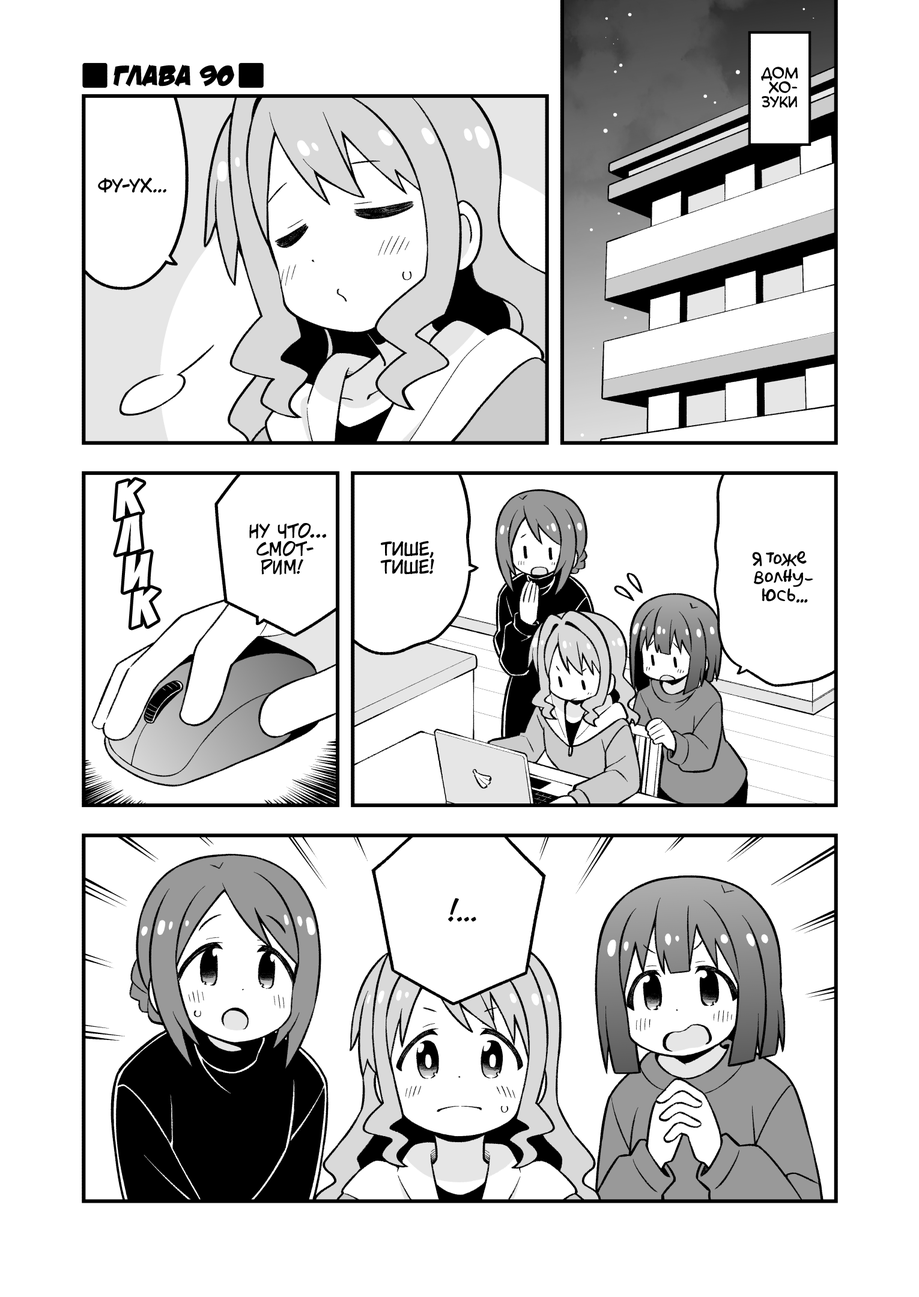
<style>
.page{position:relative;width:919px;height:1297px;background:#ffffff}
.page>*{position:absolute;margin:0}
.t1{font:28.8px "v_DamnNoisyKids";color:#000000;text-transform:uppercase}
.t2{font:14.4px "v_CCMonologous";color:#000000;text-transform:uppercase}
.t3{font:18px "KuraiVoice2";color:#000000;text-transform:uppercase}
.t4{font:54.1px "BadaBoom";color:#ffffff;text-transform:uppercase;scale:1.2 1}
.t5{font:18px "v_CCJeffCampbell";color:#000000;text-transform:uppercase}
.t6{font:18px "AkbarPlain";color:#000000}
.t7{font:21.6px "v_CCJeffCampbell";color:#000000;text-transform:uppercase}
.t8{font:28.8px "v_CCJeffCampbell";color:#000000;text-transform:uppercase}
</style>
<div class="page">
<p class="t1" style="left:113px;top:64px;width:121px;height:22px">Глава 90</p>
<p class="t2" style="left:761px;top:67px;width:37px;height:41px;text-align:center">Дом<br>Хо-<br>зуки</p>
<p class="t3" style="left:98px;top:178px;width:68px;height:15px">Фу-ух...</p>
<p class="t4" style="left:115px;top:480px;width:29px;height:40px;rotate:-7deg">к</p>
<p class="t4" style="left:116px;top:515px;width:26px;height:40px;rotate:-7deg">л</p>
<p class="t5" style="left:249px;top:523px;width:77px;height:52px;text-align:center">Ну что...<br>Смот-<br>рим!</p>
<p class="t3" style="left:380px;top:541px;width:54px;height:34px;text-align:center">Тише,<br>тише!</p>
<p class="t4" style="left:123px;top:552px;width:28px;height:40px;rotate:-7deg">и</p>
<p class="t6" style="left:752px;top:551px;width:61px;height:52px;text-align:center">Я тоже<br>волну-<br>юсь...</p>
<p class="t4" style="left:131px;top:588px;width:28px;height:40px;rotate:-7deg">к</p>
<p class="t7" style="left:448px;top:898px;width:28px;height:24px"><span class="t8">!</span>...</p>
</div>
